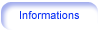
<style>
.page{position:relative;width:100px;height:33px;background:#ffffff}
.page>*{position:absolute;margin:0}
.t1{font:11px "ArialMT";color:#092ff6}
</style>
<div class="page">
<p class="t1" style="left:20px;top:11px;width:59px;height:8px">Informations</p>
</div>
